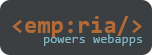
<style>
.page{position:relative;width:153px;height:55px;background:#3c3f41}
.page>*{position:absolute;margin:0}
.t1{font:24px "Consolas-Bold";color:#b26b37}
.t2{font:13px "Consolas";color:#7eb6c5}
</style>
<div class="page">
<p class="t1" style="left:12px;top:16px;width:130px;height:22px">&lt;emp:ria/&gt;</p>
<p class="t2" style="left:44px;top:34px;width:99px;height:12px">powers webapps</p>
</div>
